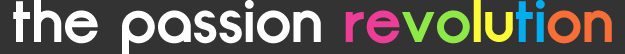
<style>
.page{position:relative;width:625px;height:54px;background:#333333}
.page>*{position:absolute;margin:0}
.t1{font:60px "Opificio-Bold";color:#ffffff}
.t2{font:60px "Opificio-Bold";color:#ed3d96}
.t3{font:60px "Opificio-Bold";color:#8ee848}
.t4{font:60px "Opificio-Bold";color:#fdfb35}
.t5{font:60px "Opificio-Bold";color:#00aeef}
.t6{font:60px "Opificio-Bold";color:#f96e37}
</style>
<div class="page">
<p class="t1" style="left:13px;top:0px;width:599px;height:54px">the passion <span class="t2">re</span><span class="t3">vo</span><span class="t4">lu</span><span class="t5">ti</span><span class="t6">on</span></p>
</div>
